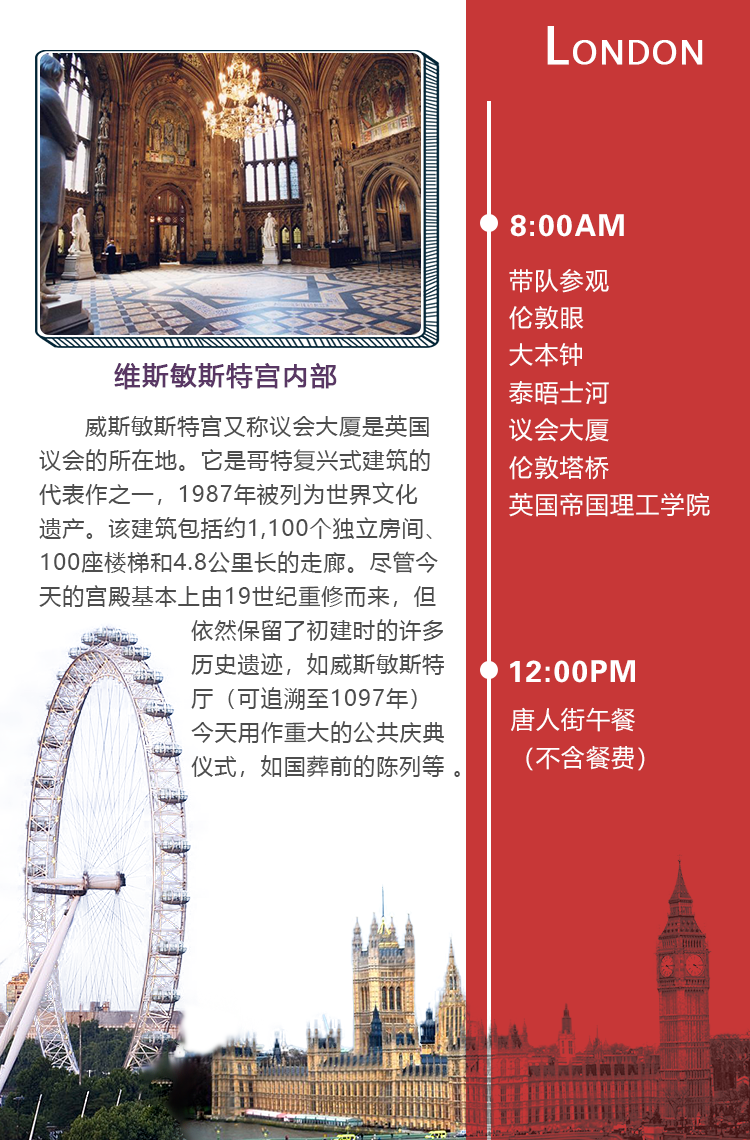
<style>
.page{position:relative;width:750px;height:1140px;background:#c73737}
.page>*{position:absolute;margin:0}
.t1{font:30.5px "MicrosoftYaHei";letter-spacing:0.05em;color:#ffffff;font-weight:bold}
.t2{font:48.8px "MicrosoftYaHei";letter-spacing:0.05em;color:#ffffff;font-weight:bold}
.t3{font:29.9px "FZZYJW--GB1-0";letter-spacing:0.05em;color:#ffffff}
.t4{font:23.9px/37.4px "MicrosoftYaHei";letter-spacing:0.05em;color:#ffffff}
.t5{font:26px "MicrosoftYaHei";letter-spacing:0.05em;color:#593764;font-weight:bold}
.t6{font:22px/34px "MicrosoftYaHei";letter-spacing:0.05em;color:#4d4d4d}
.t7{font:26px/34px "MicrosoftYaHei";letter-spacing:0.05em;color:#593764}
.t8{font:30.2px "FZZYJW--GB1-0";letter-spacing:0.05em;color:#ffffff}
.t9{font:24.2px/37.8px "MicrosoftYaHei";letter-spacing:0.05em;color:#ffffff}
</style>
<div class="page">
<p class="t1" style="left:547px;top:26px;width:156px;height:39px"><span class="t2">L</span>ONDON</p>
<p class="t3" style="left:510px;top:214px;width:114px;height:23px">8:00AM</p>
<p class="t4" style="left:509px;top:269px;width:201px;height:248px">带队参观<br>伦敦眼<br>大本钟<br>泰晤士河<br>议会大厦<br>伦敦塔桥<br>英国帝国理工学院</p>
<p class="t5" style="left:114px;top:363px;width:223px;height:27px">维斯敏斯特宫内部</p>
<p class="t6" style="left:39px;top:415px;width:421px;height:362px"><span class="t7"><br></span>      威斯敏斯特宫又称议会大厦是英国<br>议会的所在地。它是哥特复兴式建筑的<br>代表作之一，1987年被列为世界文化<br>遗产。该建筑包括约1,100个独立房间、<br>100座楼梯和4.8公里长的走廊。尽管今<br>天的宫殿基本上由19世纪重修而来，但<br>                    依然保留了初建时的许多<br>                    历史遗迹，如威斯敏斯特<br>                    厅（可追溯至1097年）<br>，                 今天用作重大的公共庆典<br>                    仪式，如国葬前的陈列等 。</p>
<p class="t8" style="left:510px;top:660px;width:125px;height:23px">12:00PM</p>
<p class="t9" style="left:511px;top:707px;width:134px;height:64px">唐人街午餐<br>（不含餐费）</p>
</div>
